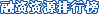
<style>
.page{position:relative;width:99px;height:14px;background:#ffffff}
.page>*{position:absolute;margin:0}
.t1{font:13px "SimSun";color:#ffffff;font-weight:bold}
</style>
<div class="page">
<p class="t1" style="left:1px;top:1px;width:97px;height:12px">融资资源排行榜</p>
</div>
